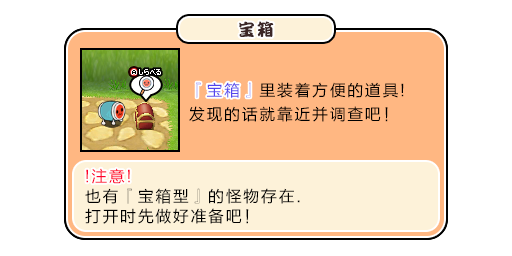
<style>
.page{position:relative;width:512px;height:256px;background:#ffffff}
.page>*{position:absolute;margin:0}
.t1{font:17px "DFPKanTingLiuW9";letter-spacing:0.1em;color:#3b2626}
.t2{font:16px/24px "FZLTHJW--GB1-0";letter-spacing:0.1em;color:#000000}
.t3{font:16px/24px "FZLTHJW--GB1-0";letter-spacing:0.1em;color:#5444ed}
.t4{font:16px "FZLTHJW--GB1-0";letter-spacing:0.1em;color:#5444ed}
.t5{font:16px/20px "FZLTHJW--GB1-0";letter-spacing:0.1em;color:#000000}
.t6{font:16px/20px "FZLTHJW--GB1-0";letter-spacing:0.1em;color:#ff002a}
.t7{font:16px "FZLTHJW--GB1-0";letter-spacing:0.1em;color:#ff002a}
</style>
<div class="page">
<p class="t1" style="left:239px;top:21px;width:35px;height:16px">宝箱</p>
<p class="t2" style="left:189px;top:82px;width:215px;height:40px"><span class="t3">『宝箱』</span>里装着方便的道具!<br>发现的话就靠近并调查吧！</p>
<p class="t4" style="left:196px;top:82px;width:55px;height:16px">『宝箱』</p>
<p class="t5" style="left:85px;top:168px;width:215px;height:56px"><span class="t6">!注意!<br></span>也有『宝箱型』的怪物存在.<br>打开时先做好准备吧！</p>
<p class="t7" style="left:86px;top:168px;width:44px;height:16px">!注意!</p>
</div>
